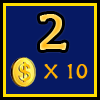
<style>
.page{position:relative;width:100px;height:100px;background:#061963}
.page>*{position:absolute;margin:0}
.t1{font:60px "Herculanum";font-weight:bold}
.t2{font:24px "Herculanum";color:#ffae00;font-weight:bold}
</style>
<div class="page">
<p class="t1" style="left:39px;top:14px;width:28px;height:36px">2</p>
<p class="t2" style="left:44px;top:64px;width:44px;height:15px">x 10</p>
</div>
